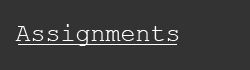
<style>
.page{position:relative;width:250px;height:70px;background:#333333}
.page>*{position:absolute;margin:0}
.t1{font:25px "CourierNewPSMT";color:#ffffff}
</style>
<div class="page">
<p class="t1" style="left:15px;top:24px;width:164px;height:22px">Assignments</p>
</div>
